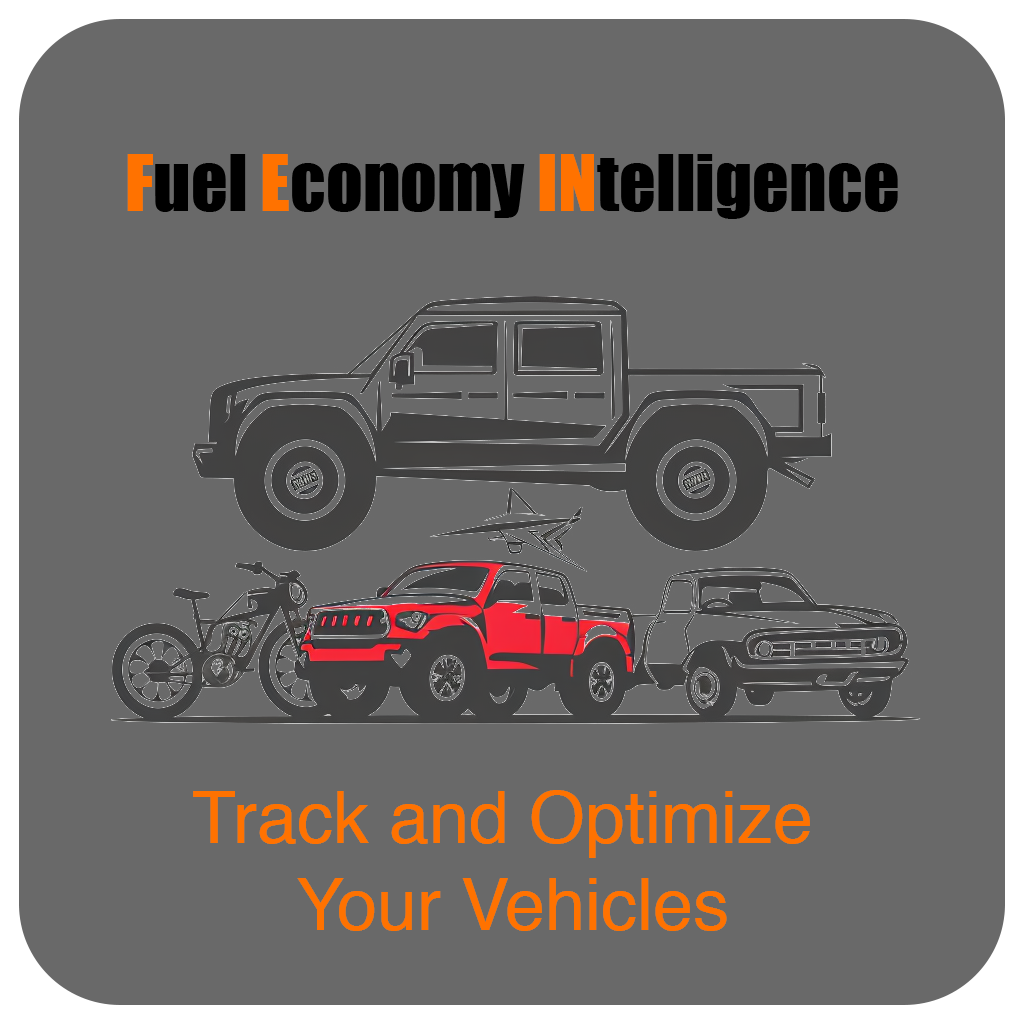
<style>
.page{position:relative;width:1024px;height:1024px;background:#696969}
.page>*{position:absolute;margin:0}
.t1{font:72px "Impact";color:#000000}
.t2{font:72px "Impact";color:#ff7200}
.t3{font:72px "Helvetica";color:#ff7200}
</style>
<div class="page">
<p class="t1" style="left:127px;top:154px;width:771px;height:65px"><span class="t2">F</span>uel <span class="t2">E</span>conomy <span class="t2">IN</span>telligence</p>
<p class="t3" style="left:193px;top:790px;width:617px;height:141px;text-align:center">Track and Optimize <br>Your Vehicles</p>
</div>
